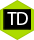
<style>
.page{position:relative;width:34px;height:40px;background:#ffffff}
.page>*{position:absolute;margin:0}
.t1{font:18px "MyriadPro-Regular";color:#ffffff}
</style>
<div class="page">
<p class="t1" style="left:7px;top:12px;width:21px;height:13px">TD</p>
</div>
